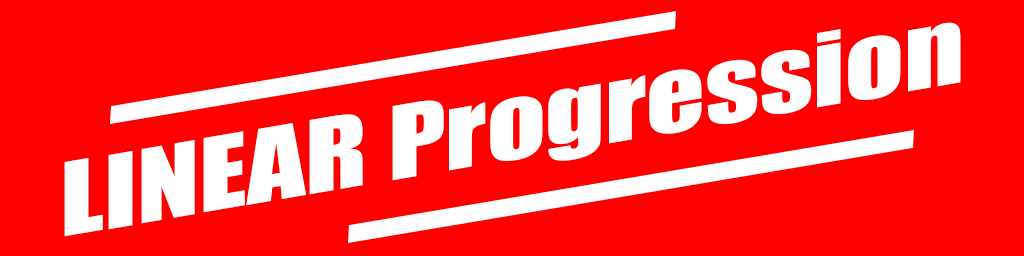
<style>
.page{position:relative;width:1024px;height:256px;background:#ff0000}
.page>*{position:absolute;margin:0}
.t1{font:93.7px "Impact";color:#ffffff;scale:1.25 1}
</style>
<div class="page">
<p class="t1" style="left:64px;top:22px;width:897px;height:215px;rotate:-10deg">LINEAR Progression</p>
</div>
